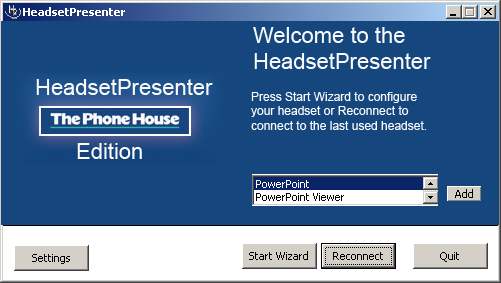
<style>
.page{position:relative;width:501px;height:283px;background:#15467e}
.page>*{position:absolute;margin:0}
.t1{font:22px "ArialMT";color:#f9fafc}
.t2{font:22px "ArialMT";color:#fcfafa}
.t3{font:12px "ArialMT";color:#f9fafc}
.t4{font:22px "ArialMT";color:#fefbfb}
</style>
<div class="page">
<p class="t1" style="left:253px;top:27px;width:178px;height:42px">Welcome to the <br>HeadsetPresenter</p>
<p class="t2" style="left:36px;top:79px;width:177px;height:16px">HeadsetPresenter</p>
<p class="t3" style="left:251px;top:92px;width:176px;height:38px">Press Start Wizard to configure<br>your headset or Reconnect to <br>connect to the last used headset.</p>
<p class="t4" style="left:77px;top:143px;width:65px;height:16px">Edition</p>
</div>
